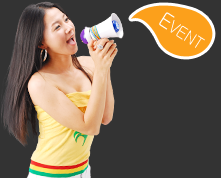
<style>
.page{position:relative;width:221px;height:178px;background:#333333}
.page>*{position:absolute;margin:0}
.t1{font:16.9px "Gulim";letter-spacing:-0.025em;color:#ffffff;scale:0.93 1}
.t2{font:21.2px "Gulim";letter-spacing:-0.025em;color:#ffffff;scale:0.93 1}
</style>
<div class="page">
<p class="t1" style="left:159px;top:12px;width:46px;height:36px;rotate:32deg"><span class="t2">E</span>VENT</p>
</div>
